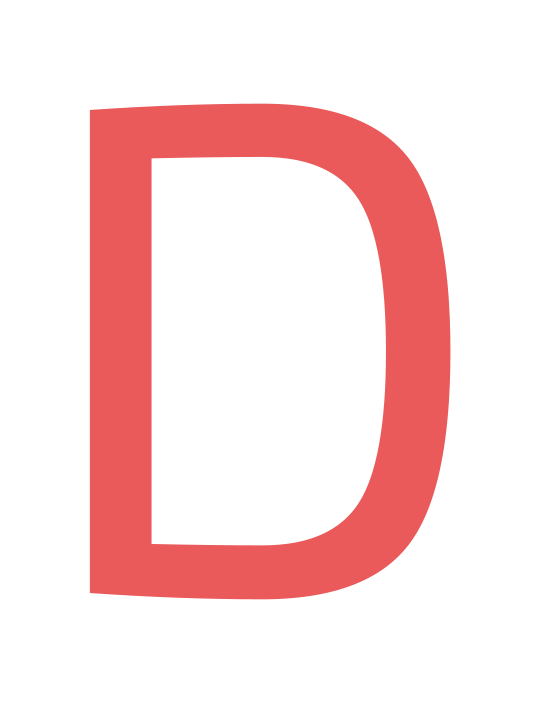
<style>
.page{position:relative;width:540px;height:702px;background:#ffffff}
.page>*{position:absolute;margin:0}
.t1{font:700px "Exo2-Regular";color:#ea5a5a}
</style>
<div class="page">
<p class="t1" style="left:89px;top:103px;width:362px;height:497px">D</p>
</div>
